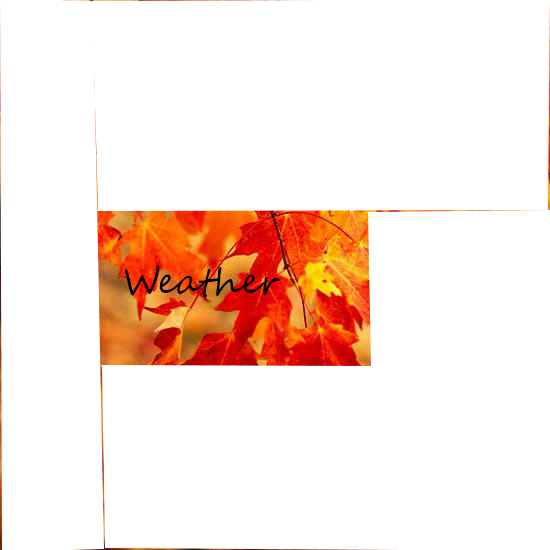
<style>
.page{position:relative;width:550px;height:550px;background:#ffffff}
.page>*{position:absolute;margin:0}
.t1{font:36px "SegoeScript";color:#000000}
</style>
<div class="page">
<p class="t1" style="left:125px;top:265px;width:155px;height:32px">Weather</p>
</div>
